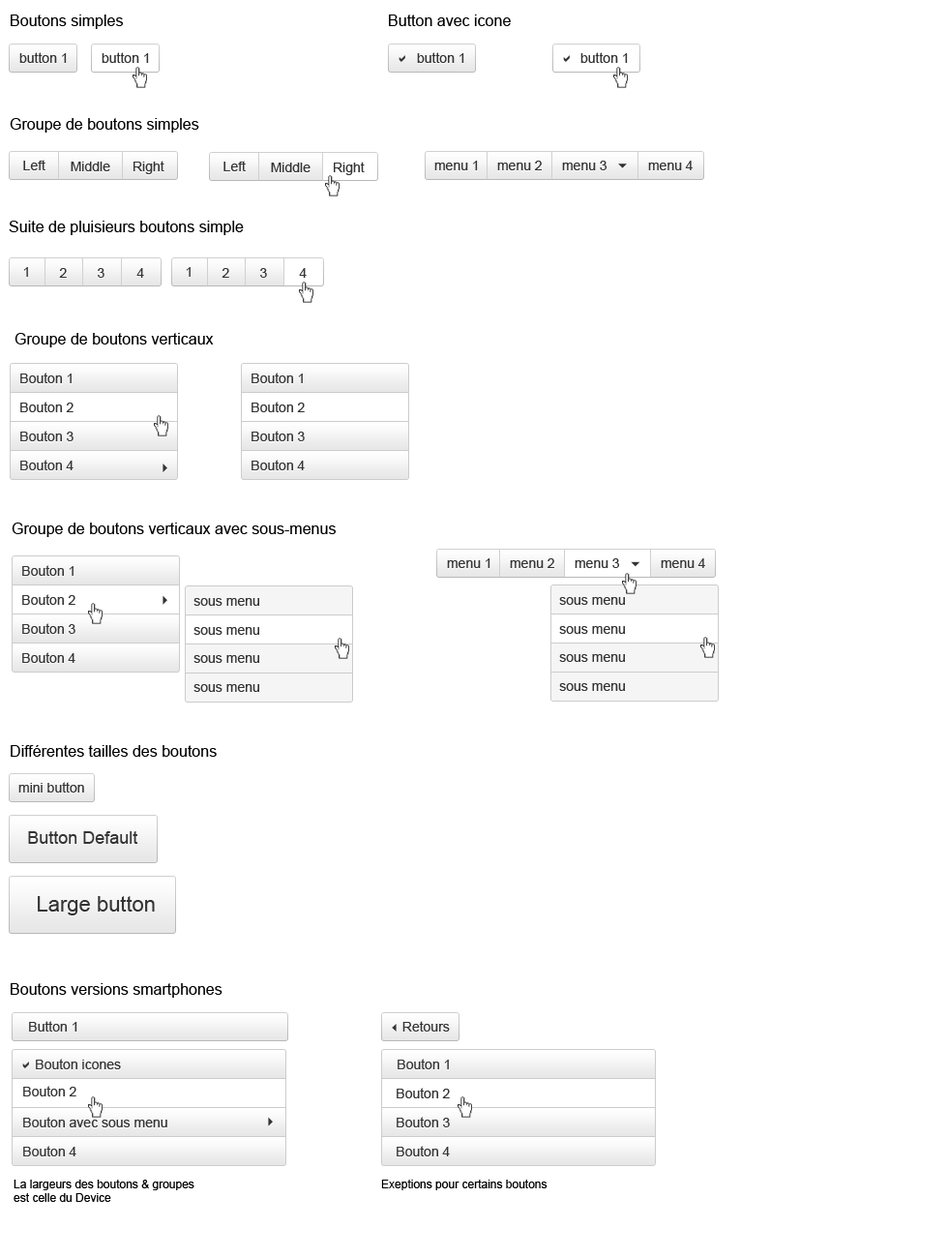
<style>
.page{position:relative;width:948px;height:1258px;background:#ffffff}
.page>*{position:absolute;margin:0}
.t1{font:15.5px "ArialMT";color:#000000}
.t2{font:13.5px "ArialMT";color:#343434}
.t3{font:17.4px "ArialMT";color:#343434}
.t4{font:21.3px "ArialMT";color:#343434}
.t5{font:13.5px "Webdings";color:#343434}
.t6{font:11.6px/13.5px "ArialMT";color:#000000}
.t7{font:11.6px "ArialMT";color:#000000}
</style>
<div class="page">
<p class="t1" style="left:11px;top:15px;width:112px;height:14px">Boutons simples</p>
<p class="t1" style="left:389px;top:15px;width:122px;height:11px">Button avec icone</p>
<p class="t2" style="left:19px;top:52px;width:48px;height:11px">button 1</p>
<p class="t2" style="left:102px;top:52px;width:47px;height:11px">button 1</p>
<p class="t2" style="left:417px;top:52px;width:47px;height:11px">button 1</p>
<p class="t2" style="left:580px;top:52px;width:48px;height:11px">button 1</p>
<p class="t1" style="left:10px;top:118px;width:189px;height:15px">Groupe de boutons simples</p>
<p class="t2" style="left:23px;top:160px;width:22px;height:10px">Left</p>
<p class="t2" style="left:71px;top:162px;width:39px;height:9px">Middle</p>
<p class="t2" style="left:134px;top:161px;width:30px;height:13px">Right</p>
<p class="t2" style="left:223px;top:161px;width:23px;height:10px">Left</p>
<p class="t2" style="left:334px;top:162px;width:31px;height:13px">Right</p>
<p class="t2" style="left:434px;top:161px;width:44px;height:9px">menu 1</p>
<p class="t2" style="left:497px;top:161px;width:45px;height:9px">menu 2</p>
<p class="t2" style="left:562px;top:161px;width:45px;height:9px">menu 3</p>
<p class="t2" style="left:648px;top:161px;width:45px;height:9px">menu 4</p>
<p class="t2" style="left:271px;top:163px;width:40px;height:9px">Middle</p>
<p class="t1" style="left:9px;top:221px;width:235px;height:14px">Suite de pluisieurs boutons simple</p>
<p class="t2" style="left:23px;top:267px;width:5px;height:10px">1</p>
<p class="t2" style="left:59px;top:268px;width:8px;height:10px">2</p>
<p class="t2" style="left:98px;top:268px;width:6px;height:10px">3</p>
<p class="t2" style="left:136px;top:268px;width:8px;height:10px">4</p>
<p class="t2" style="left:186px;top:267px;width:5px;height:10px">1</p>
<p class="t2" style="left:222px;top:268px;width:7px;height:10px">2</p>
<p class="t2" style="left:260px;top:268px;width:7px;height:10px">3</p>
<p class="t2" style="left:299px;top:268px;width:8px;height:10px">4</p>
<p class="t1" style="left:15px;top:333px;width:199px;height:14px">Groupe de boutons verticaux</p>
<p class="t2" style="left:20px;top:372px;width:52px;height:11px">Bouton 1</p>
<p class="t2" style="left:252px;top:372px;width:51px;height:11px">Bouton 1</p>
<p class="t2" style="left:20px;top:401px;width:54px;height:11px">Bouton 2</p>
<p class="t2" style="left:252px;top:401px;width:53px;height:11px">Bouton 2</p>
<p class="t2" style="left:20px;top:431px;width:54px;height:10px">Bouton 3</p>
<p class="t2" style="left:252px;top:431px;width:53px;height:10px">Bouton 3</p>
<p class="t2" style="left:20px;top:460px;width:54px;height:10px">Bouton 4</p>
<p class="t2" style="left:252px;top:460px;width:53px;height:10px">Bouton 4</p>
<p class="t1" style="left:12px;top:522px;width:324px;height:15px">Groupe de boutons verticaux avec sous-menus</p>
<p class="t2" style="left:22px;top:565px;width:52px;height:11px">Bouton 1</p>
<p class="t2" style="left:447px;top:558px;width:44px;height:10px">menu 1</p>
<p class="t2" style="left:510px;top:558px;width:44px;height:10px">menu 2</p>
<p class="t2" style="left:575px;top:558px;width:44px;height:10px">menu 3</p>
<p class="t2" style="left:661px;top:558px;width:44px;height:10px">menu 4</p>
<p class="t2" style="left:22px;top:594px;width:53px;height:11px">Bouton 2</p>
<p class="t2" style="left:193px;top:598px;width:66px;height:8px">sous menu</p>
<p class="t2" style="left:559px;top:597px;width:66px;height:8px">sous menu</p>
<p class="t2" style="left:22px;top:623px;width:53px;height:11px">Bouton 3</p>
<p class="t2" style="left:193px;top:627px;width:66px;height:8px">sous menu</p>
<p class="t2" style="left:559px;top:626px;width:66px;height:8px">sous menu</p>
<p class="t2" style="left:22px;top:652px;width:53px;height:11px">Bouton 4</p>
<p class="t2" style="left:193px;top:655px;width:66px;height:8px">sous menu</p>
<p class="t2" style="left:559px;top:654px;width:66px;height:8px">sous menu</p>
<p class="t2" style="left:193px;top:684px;width:66px;height:8px">sous menu</p>
<p class="t2" style="left:559px;top:683px;width:66px;height:8px">sous menu</p>
<p class="t1" style="left:11px;top:745px;width:206px;height:12px">Différentes tailles des boutons</p>
<p class="t2" style="left:18px;top:782px;width:66px;height:10px">mini button</p>
<p class="t3" style="left:28px;top:831px;width:110px;height:13px">Button Default</p>
<p class="t4" style="left:38px;top:896px;width:117px;height:19px">Large button</p>
<p class="t1" style="left:11px;top:983px;width:212px;height:14px">Boutons versions smartphones</p>
<p class="t2" style="left:29px;top:1021px;width:48px;height:10px">Button 1</p>
<p class="t2" style="left:392px;top:1021px;width:58px;height:10px"><span class="t5">3</span>Retours</p>
<p class="t2" style="left:36px;top:1058px;width:85px;height:11px">Bouton icones</p>
<p class="t2" style="left:398px;top:1058px;width:51px;height:11px">Bouton 1</p>
<p class="t2" style="left:23px;top:1085px;width:53px;height:11px">Bouton 2</p>
<p class="t2" style="left:397px;top:1087px;width:53px;height:11px">Bouton 2</p>
<p class="t2" style="left:23px;top:1116px;width:144px;height:11px">Bouton avec sous menu</p>
<p class="t2" style="left:397px;top:1116px;width:53px;height:11px">Bouton 3</p>
<p class="t2" style="left:23px;top:1145px;width:53px;height:11px">Bouton 4</p>
<p class="t2" style="left:397px;top:1145px;width:53px;height:11px">Bouton 4</p>
<p class="t6" style="left:14px;top:1179px;width:180px;height:23px">La largeurs des boutons &amp; groupes <br>est celle du Device</p>
<p class="t7" style="left:381px;top:1179px;width:167px;height:11px">Exeptions pour certains boutons</p>
</div>
